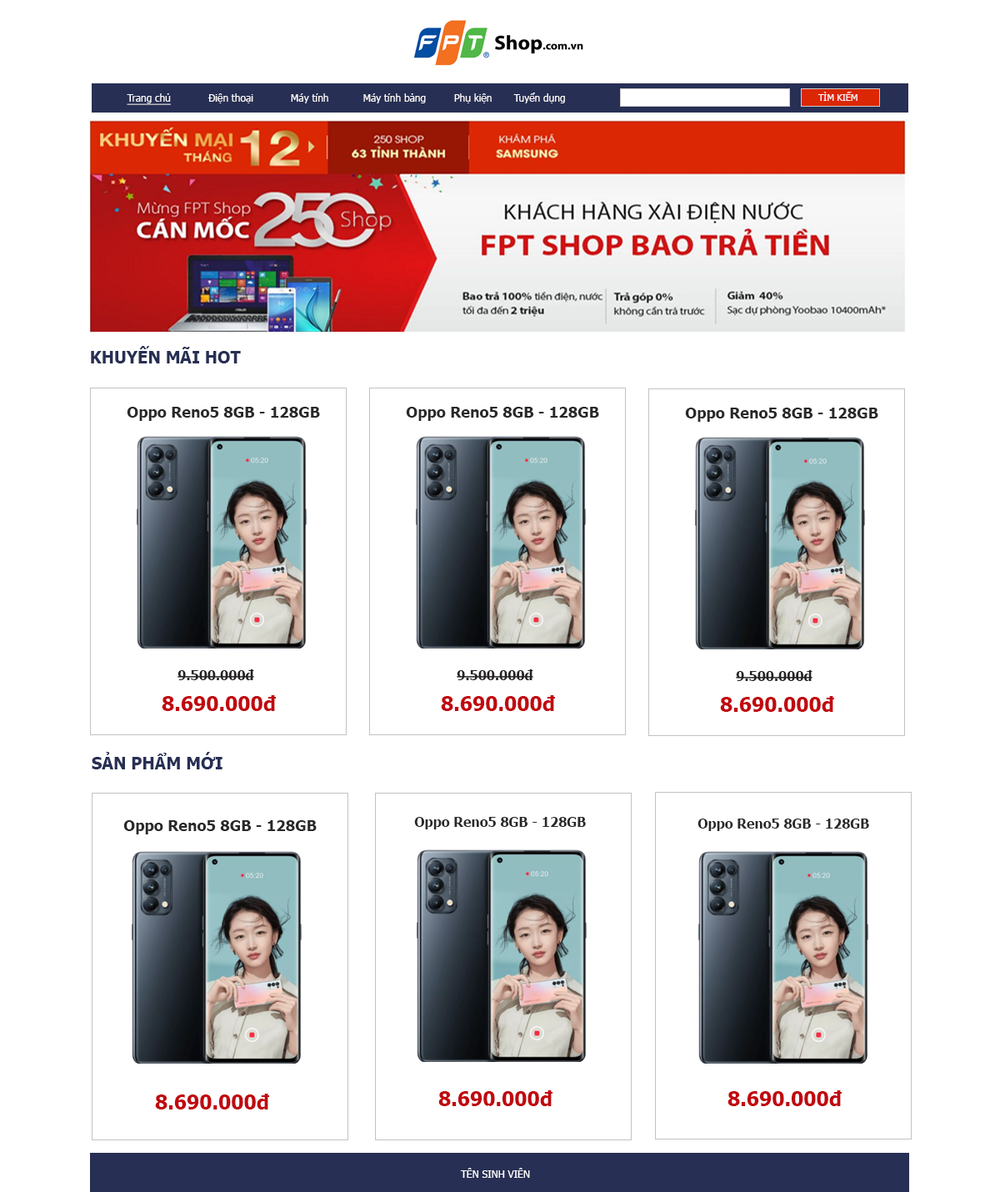
<style>
.page{position:relative;width:1000px;height:1192px;background:#ffffff}
.page>*{position:absolute;margin:0}
.t1{font:10px "Tahoma";color:#fefbfb}
.t2{font:10px "Tahoma";color:#fefbfb;text-decoration:underline}
.t3{font:9.2px "Tahoma";color:#fefbfb}
.t4{font:16.7px "Tahoma-Bold";color:#272f54}
.t5{font:15px "Tahoma-Bold";color:#2a2828}
.t6{font:13.3px "Tahoma-Bold";color:#262324}
.t7{font:20px "Tahoma-Bold";color:#c1080f}
.t8{font:13.3px "Tahoma-Bold";color:#2a2828}
.t9{font:10px "Tahoma";color:#ffffff}
</style>
<div class="page">
<p class="t1" style="left:127px;top:93px;width:438px;height:12px"><span class="t2">Trang chủ</span>            Điện thoại            Máy tính           Máy tính bảng         Phụ kiện       Tuyển dụng</p>
<p class="t3" style="left:818px;top:92px;width:40px;height:9px">TÌM KIẾM</p>
<p class="t4" style="left:91px;top:346px;width:150px;height:17px">KHUYẾN MÃI HOT</p>
<p class="t5" style="left:127px;top:407px;width:193px;height:14px">Oppo Reno5 8GB - 128GB</p>
<p class="t5" style="left:406px;top:407px;width:193px;height:14px">Oppo Reno5 8GB - 128GB</p>
<p class="t5" style="left:685px;top:408px;width:194px;height:14px">Oppo Reno5 8GB - 128GB</p>
<p class="t6" style="left:178px;top:669px;width:76px;height:11px">9.500.000đ</p>
<p class="t6" style="left:457px;top:669px;width:77px;height:11px">9.500.000đ</p>
<p class="t6" style="left:736px;top:670px;width:77px;height:11px">9.500.000đ</p>
<p class="t7" style="left:162px;top:695px;width:114px;height:16px">8.690.000đ</p>
<p class="t7" style="left:441px;top:695px;width:114px;height:16px">8.690.000đ</p>
<p class="t7" style="left:720px;top:696px;width:114px;height:16px">8.690.000đ</p>
<p class="t4" style="left:92px;top:752px;width:131px;height:17px">SẢN PHẨM MỚI</p>
<p class="t5" style="left:123px;top:820px;width:194px;height:14px">Oppo Reno5 8GB - 128GB</p>
<p class="t8" style="left:414px;top:817px;width:172px;height:12px">Oppo Reno5 8GB - 128GB</p>
<p class="t8" style="left:698px;top:819px;width:171px;height:12px">Oppo Reno5 8GB - 128GB</p>
<p class="t7" style="left:155px;top:1094px;width:114px;height:16px">8.690.000đ</p>
<p class="t7" style="left:438px;top:1090px;width:115px;height:16px">8.690.000đ</p>
<p class="t7" style="left:728px;top:1090px;width:114px;height:16px">8.690.000đ</p>
<p class="t9" style="left:460px;top:1168px;width:70px;height:10px">TÊN SINH VIÊN</p>
</div>
